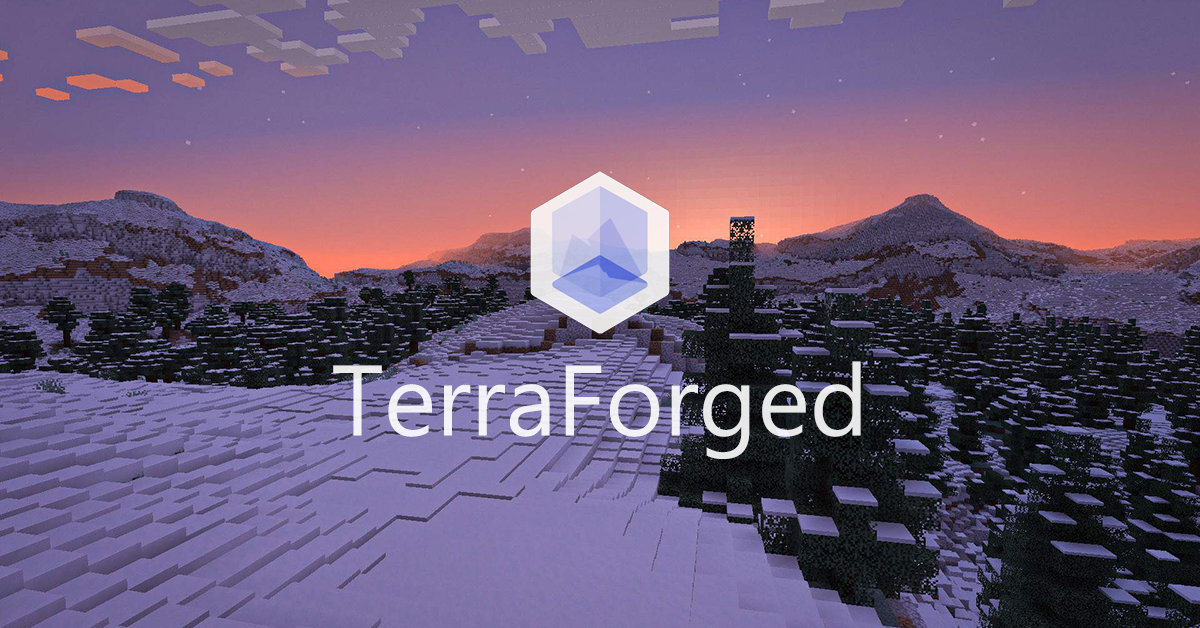
<style>
.page{position:relative;width:1200px;height:628px}
.page>*{position:absolute;margin:0}
.t1{font:100px "MicrosoftPhagsPa";color:#ffffff}
</style>
<div class="page">
<p class="t1" style="left:333px;top:361px;width:528px;height:98px">TerraForged</p>
</div>
